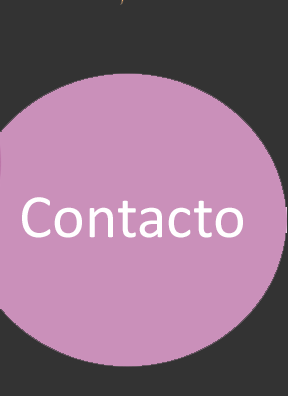
<style>
.page{position:relative;width:288px;height:396px;background:#ca90ba}
.page>*{position:absolute;margin:0}
.t1{font:62px "Calibri";color:#ffffff}
</style>
<div class="page">
<p class="t1" style="left:22px;top:197px;width:221px;height:41px">Contacto</p>
</div>
